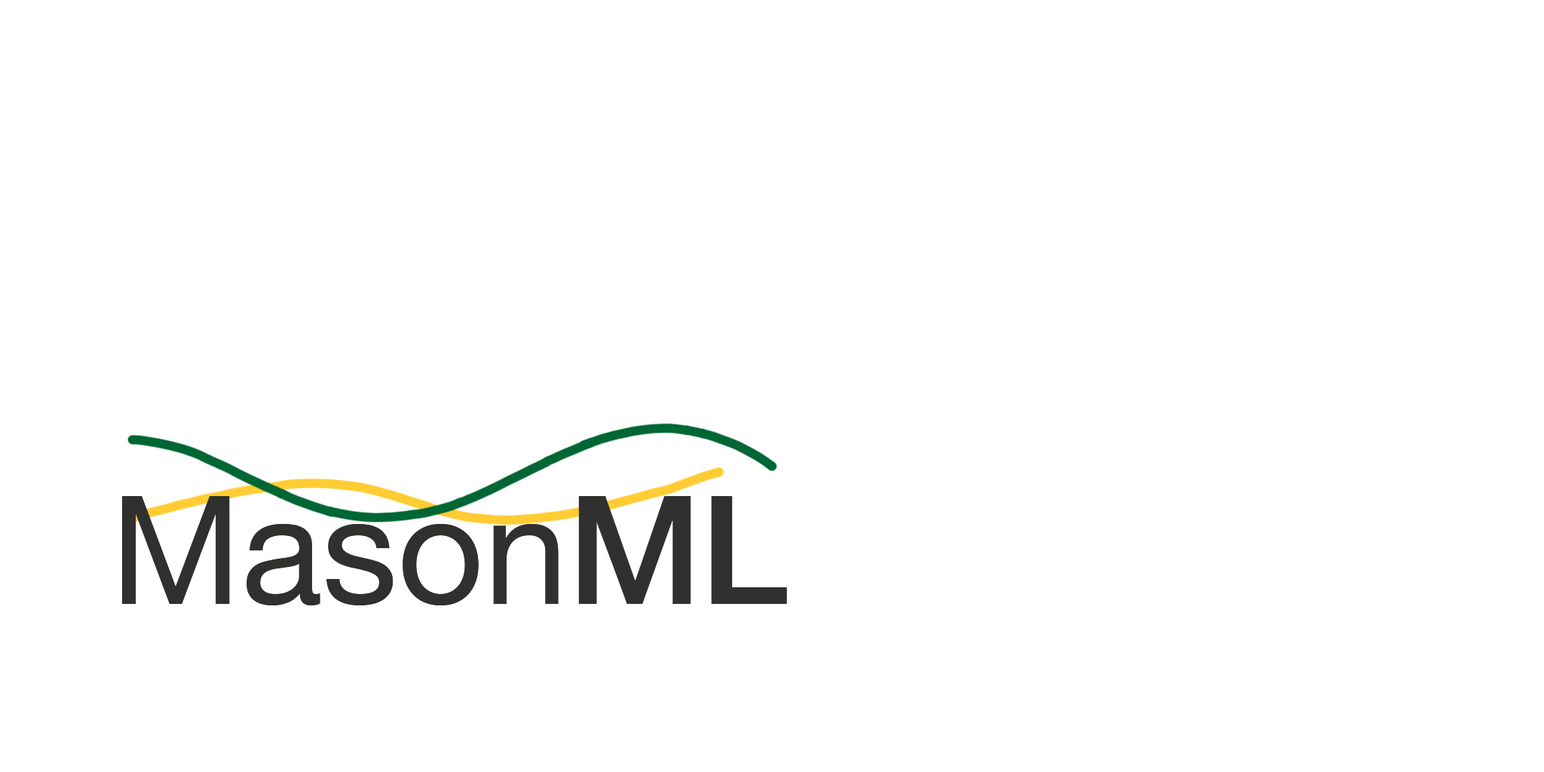
<style>
.page{position:relative;width:1544px;height:772px;background:#ffffff}
.page>*{position:absolute;margin:0}
.t1{font:150.8px "HelveticaNeue";color:#30302f}
.t2{font:150.8px "HelveticaNeue-Medium";color:#30302f}
</style>
<div class="page">
<p class="t1" style="left:121px;top:496px;width:662px;height:110px">MasonML</p>
<p class="t1" style="left:121px;top:496px;width:666px;height:110px">Mason<span class="t2">ML</span></p>
</div>
